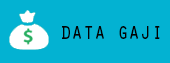
<style>
.page{position:relative;width:170px;height:63px;background:#03b2d2}
.page>*{position:absolute;margin:0}
.t1{font:24.2px "OratorStd";color:#020202;scale:0.79 1}
</style>
<div class="page">
<p class="t1" style="left:62px;top:26px;width:98px;height:13px">data gaji</p>
</div>
